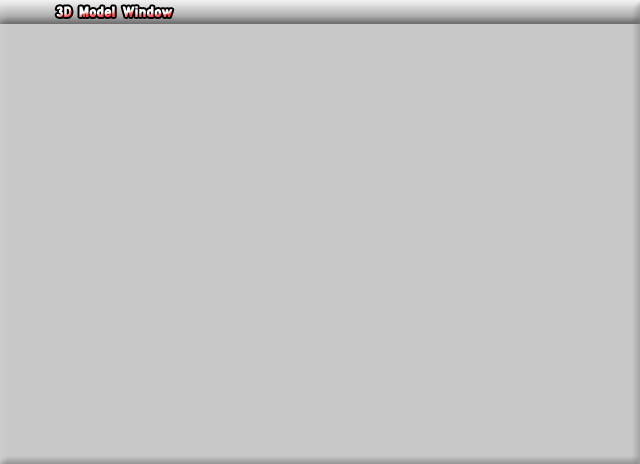
<style>
.page{position:relative;width:640px;height:464px;background:#c8c8c8}
.page>*{position:absolute;margin:0}
.t1{font:14px "GothicXB-HM"}
</style>
<div class="page">
<p class="t1" style="left:56px;top:6px;width:117px;height:11px">3D Model Window</p>
</div>
